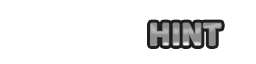
<style>
.page{position:relative;width:256px;height:64px;background:#ffffff}
.page>*{position:absolute;margin:0}
.t1{font:28.9px "Keifont"}
</style>
<div class="page">
<p class="t1" style="left:151px;top:23px;width:70px;height:22px">HINT</p>
</div>
